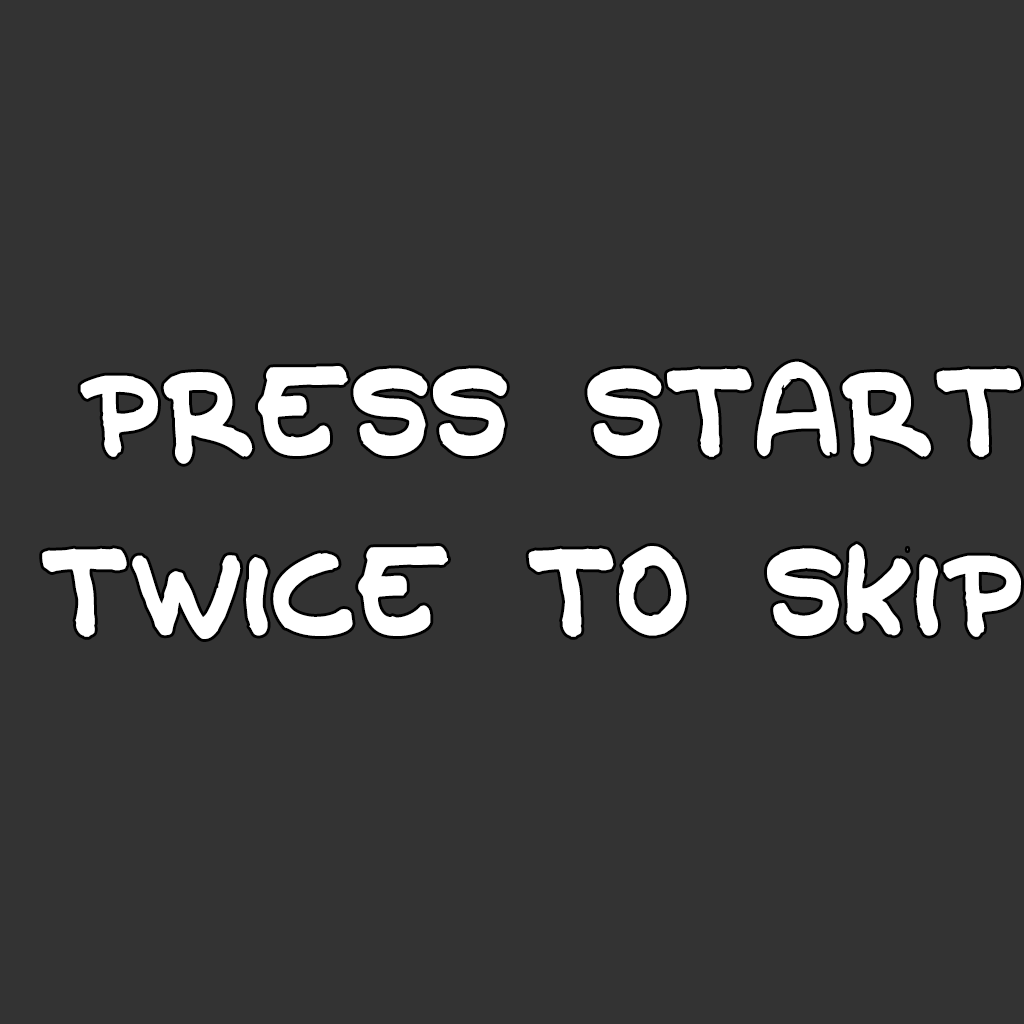
<style>
.page{position:relative;width:1024px;height:1024px;background:#333333}
.page>*{position:absolute;margin:0}
.t1{font:150px "OldCave";color:#ffffff}
</style>
<div class="page">
<p class="t1" style="left:42px;top:361px;width:979px;height:278px;text-align:right">Press start<br>twice to skip</p>
</div>
